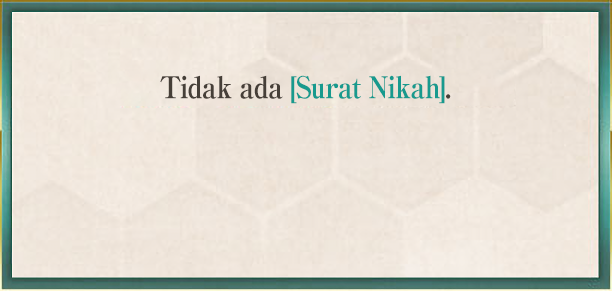
<style>
.page{position:relative;width:612px;height:291px}
.page>*{position:absolute;margin:0}
.t1{font:30px "RyuminPro-ExBold";letter-spacing:-0.04em;color:#179a8e;scale:0.9 1}
.t2{font:30px "RyuminPro-ExBold";letter-spacing:-0.04em;color:#463f38;scale:0.9 1}
.t3{font:30px "RyuminPro-ExBold";letter-spacing:-0.04em;color:#453f38;scale:0.9 1}
</style>
<div class="page">
<p class="t1" style="left:160px;top:75px;width:291px;height:29px"><span class="t2">Tidak ada </span>[Surat Nikah]<span class="t3">.</span></p>
</div>
